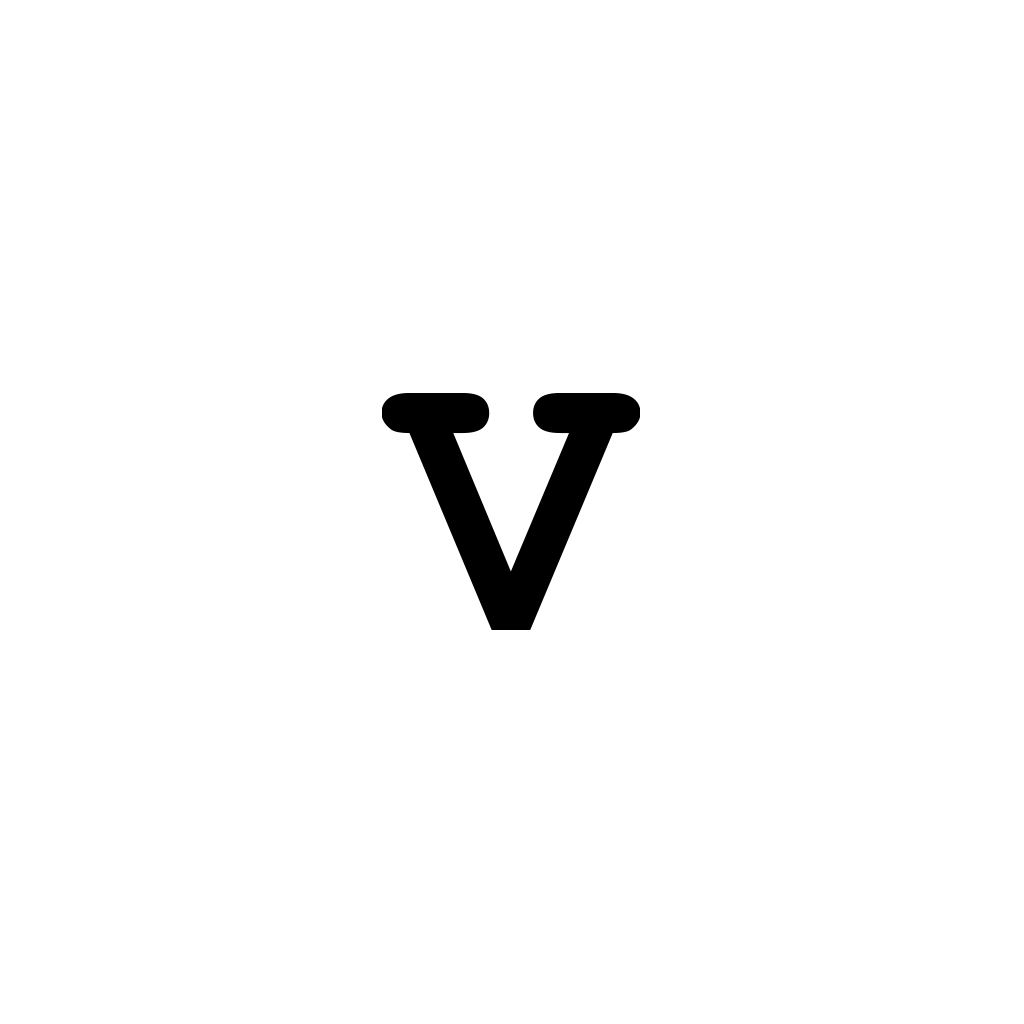
<style>
.page{position:relative;width:1024px;height:1024px;background:#ffffff}
.page>*{position:absolute;margin:0}
.t1{font:400px "CourierNewPS-BoldMT";color:#000000}
</style>
<div class="page">
<p class="t1" style="left:382px;top:393px;width:258px;height:237px">V</p>
</div>
